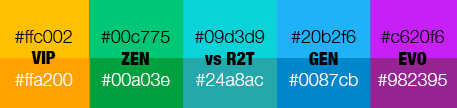
<style>
.page{position:relative;width:457px;height:108px}
.page>*{position:absolute;margin:0}
.t1{font:18px "HelveticaNeue-Light";color:#000000}
.t2{font:18px "HelveticaNeue-CondensedBlack";color:#000000}
.t3{font:18px "HelveticaNeue-Light";color:#ffffff}
</style>
<div class="page">
<p class="t1" style="left:15px;top:30px;width:58px;height:56px;text-align:center">#ffc002<br><span class="t2">VIP<br></span><span class="t3">#ffa200</span></p>
<p class="t1" style="left:101px;top:30px;width:69px;height:56px;text-align:center">#00c775<br><span class="t2">ZEN<br></span><span class="t3">#00a03e</span></p>
<p class="t1" style="left:194px;top:30px;width:71px;height:56px;text-align:center">#09d3d9<br><span class="t2">vs R2T<br></span><span class="t3">#24a8ac</span></p>
<p class="t1" style="left:289px;top:30px;width:69px;height:56px;text-align:center">#20b2f6<br><span class="t2">GEN<br></span><span class="t3">#0087cb</span></p>
<p class="t1" style="left:378px;top:30px;width:69px;height:56px;text-align:center">#c620f6<br><span class="t2">EVO<br></span><span class="t3">#982395</span></p>
</div>
